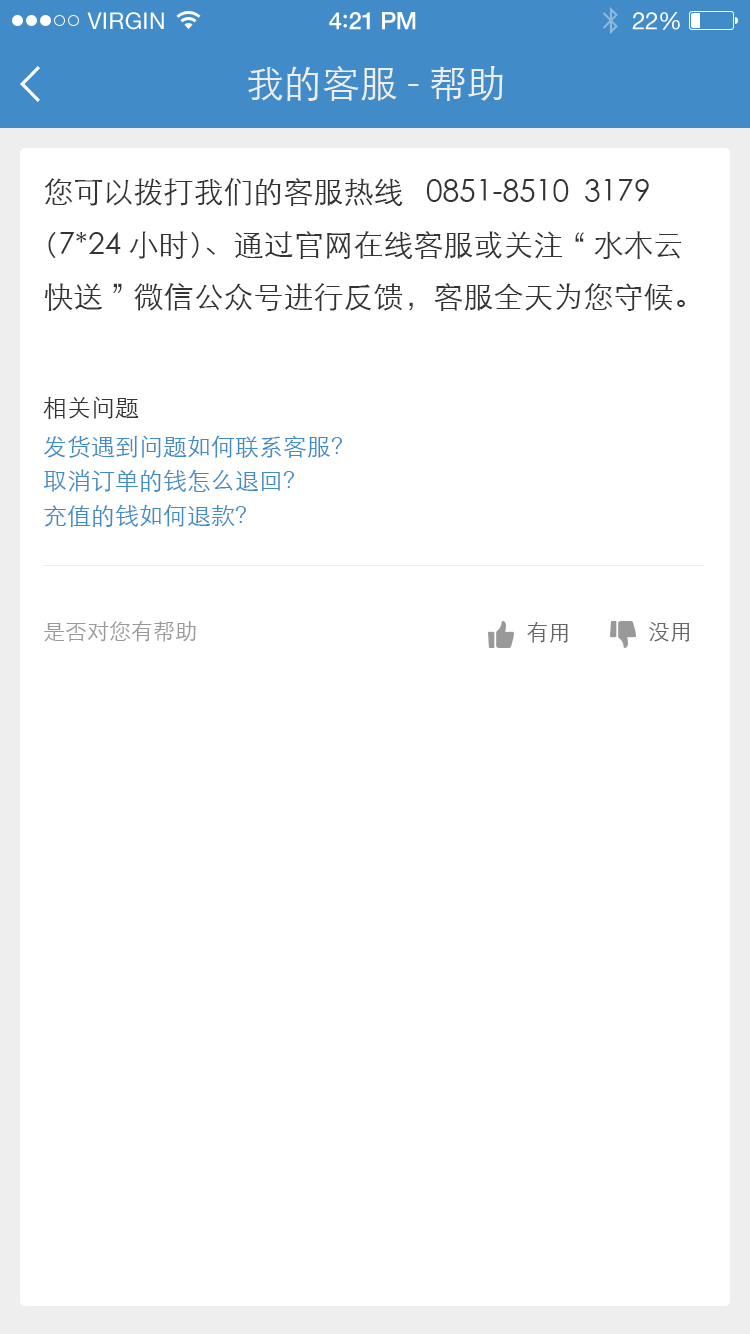
<style>
.page{position:relative;width:750px;height:1334px;background:#ffffff}
.page>*{position:absolute;margin:0}
.t1{font:23px "HelveticaNeue";letter-spacing:0.02em;color:#ffffff}
.t2{font:24px "HelveticaNeue-Medium";letter-spacing:-0.02em;color:#ffffff}
.t3{font:26px "Avenir-Medium";letter-spacing:-0.02em;color:#ffffff}
.t4{font:24px "HelveticaNeue";letter-spacing:-0.02em;color:#ffffff}
.t5{font:38px "STXihei";color:#eeeeee}
.t6{font:30px "STXihei";color:#333333}
.t7{font:24px "STXihei";color:#333333}
.t8{font:24px "STXihei";color:#418bc8}
.t9{font:22px "STXihei";color:#999999}
.t10{font:22px "STXihei";color:#666666}
</style>
<div class="page">
<p class="t1" style="left:87px;top:12px;width:77px;height:18px">VIRGIN</p>
<p class="t2" style="left:329px;top:12px;width:87px;height:18px">4<span class="t3">:</span>21 PM</p>
<p class="t4" style="left:632px;top:12px;width:48px;height:18px">22%</p>
<p class="t5" style="left:248px;top:66px;width:255px;height:35px">我的客服-帮助</p>
<p class="t6" style="left:44px;top:178px;width:641px;height:133px">您可以拨打我们的客服热线   0851-8510  3179（7*24小时）、通过官网在线客服或关注“水木云快送”微信公众号进行反馈，客服全天为您守候。</p>
<p class="t7" style="left:43px;top:396px;width:96px;height:23px">相关问题</p>
<p class="t8" style="left:44px;top:435px;width:298px;height:23px">发货遇到问题如何联系客服？</p>
<p class="t8" style="left:44px;top:469px;width:250px;height:23px">取消订单的钱怎么退回？</p>
<p class="t8" style="left:44px;top:504px;width:202px;height:23px">充值的钱如何退款？</p>
<p class="t9" style="left:44px;top:621px;width:152px;height:21px">是否对您有帮助</p>
<p class="t10" style="left:527px;top:622px;width:41px;height:21px">有用</p>
<p class="t10" style="left:649px;top:622px;width:41px;height:20px">没用</p>
</div>
